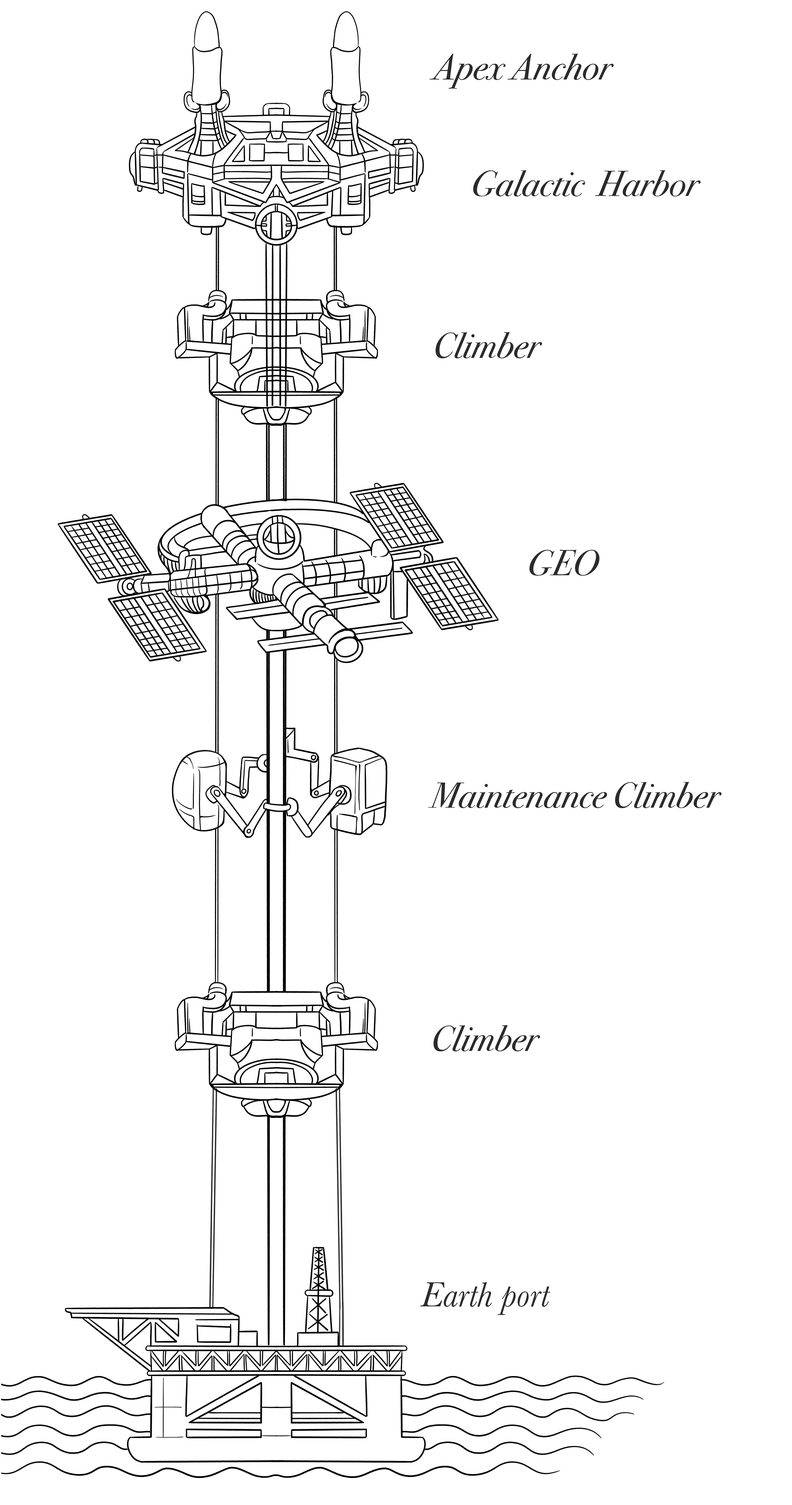
<style>
.page{position:relative;width:792px;height:1505px;background:#ffffff}
.page>*{position:absolute;margin:0}
.t1{font:36.3px "BodoniSvtyTwoITCTT-BookIta";color:#2b2b2b}
.t2{font:36.3px "MyriadPro-Regular";color:#2b2b2b}
.t3{font:36.3px "Baskerville-Italic";color:#2b2b2b}
</style>
<div class="page">
<p class="t1" style="left:429px;top:54px;width:185px;height:35px">Apex Anchor</p>
<p class="t1" style="left:473px;top:170px;width:228px;height:27px">Galactic  Harbor</p>
<p class="t1" style="left:435px;top:332px;width:107px;height:26px"><span class="t2"> </span>Climber</p>
<p class="t1" style="left:529px;top:550px;width:71px;height:26px"><span class="t2"> </span>GEO</p>
<p class="t1" style="left:428px;top:782px;width:294px;height:27px">Maintenance Climber</p>
<p class="t1" style="left:433px;top:1026px;width:107px;height:26px"><span class="t2"> </span>Climber</p>
<p class="t3" style="left:420px;top:1282px;width:130px;height:33px">Earth port</p>
</div>
